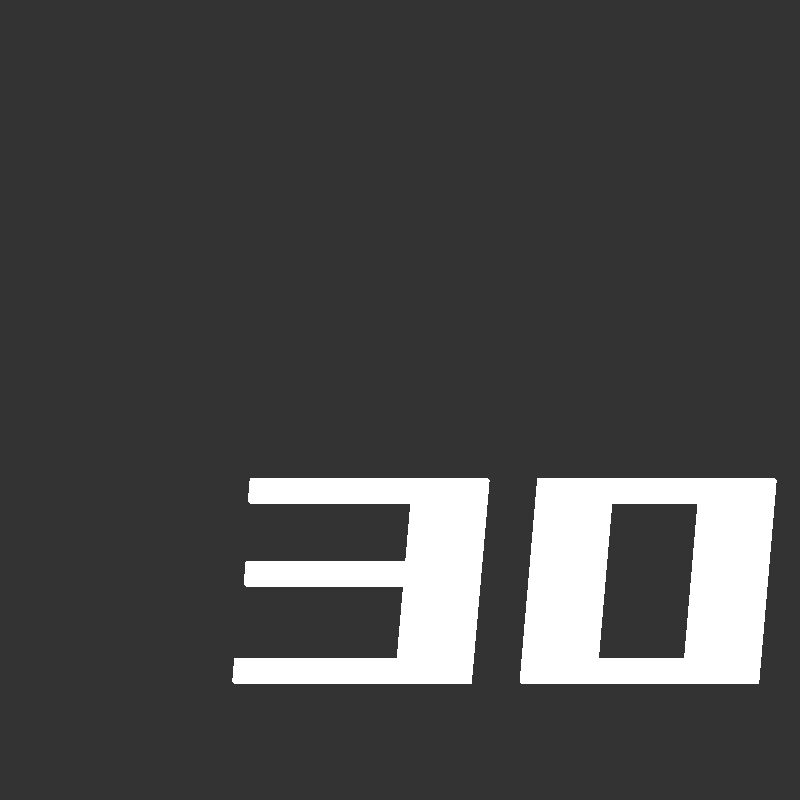
<style>
.page{position:relative;width:800px;height:800px;background:#333333}
.page>*{position:absolute;margin:0}
.t1{font:355.4px "851Gkktt";color:#ffffff;font-weight:bold}
</style>
<div class="page">
<p class="t1" style="left:232px;top:478px;width:545px;height:206px">30</p>
</div>
